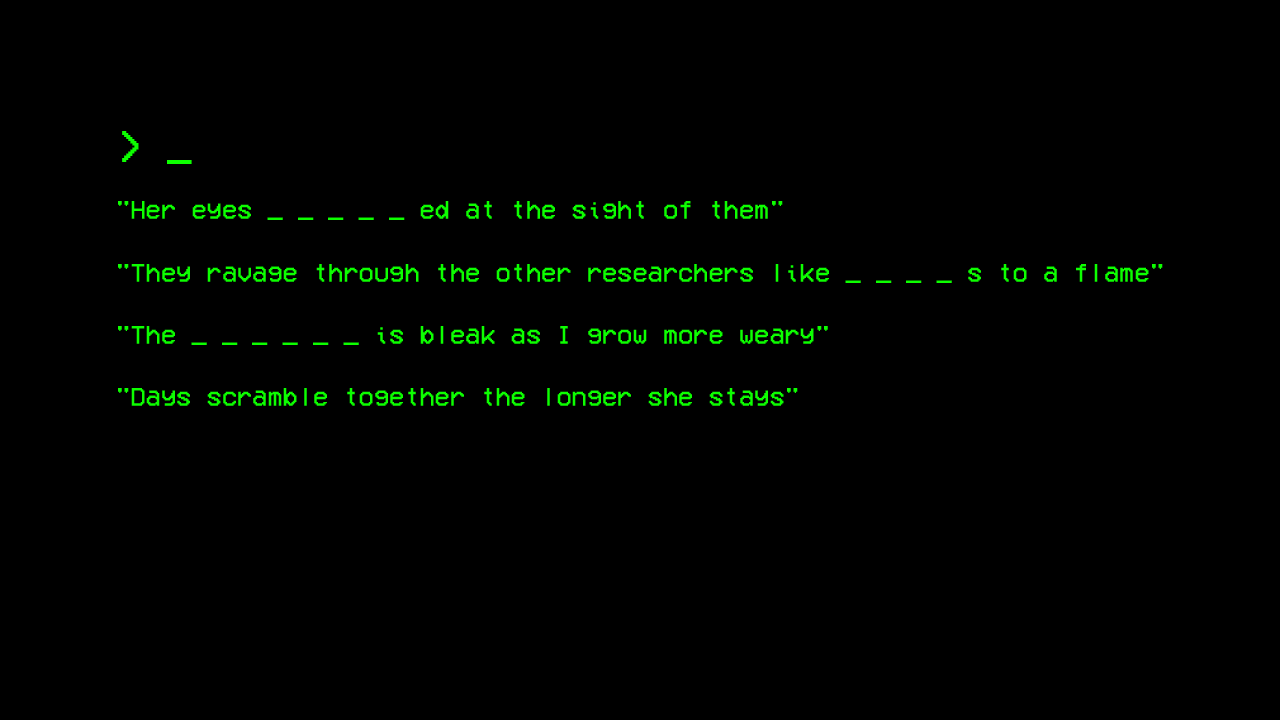
<style>
.page{position:relative;width:1280px;height:720px;background:#000000}
.page>*{position:absolute;margin:0}
.t1{font:41.5px "VCROSDMono";color:#0dff00}
.t2{font:26px/62.3px "VCROSDMono";color:#0dff00}
</style>
<div class="page">
<p class="t1" style="left:122px;top:131px;width:70px;height:33px">&gt; _</p>
<p class="t2" style="left:118px;top:201px;width:1045px;height:205px">"Her eyes _ _ _ _ _ ed at the sight of them"<br>    "They ravage through the other researchers like _ _ _ _ s to a flame"<br>    "The _ _ _ _ _ _ is bleak as I grow more weary"<br>    "Days scramble together the longer she stays"</p>
</div>
